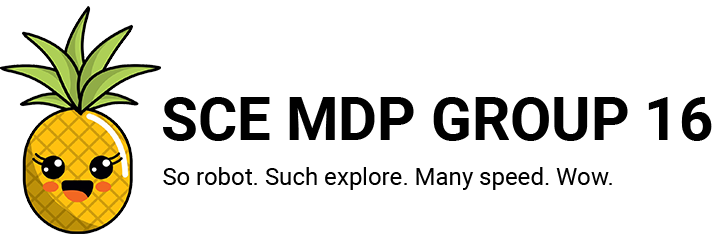
<style>
.page{position:relative;width:720px;height:240px;background:#ffffff}
.page>*{position:absolute;margin:0}
.t1{font:60px "Roboto-Bold";color:#000000}
.t2{font:24px "Roboto-Regular";color:#000000}
</style>
<div class="page">
<p class="t1" style="left:163px;top:97px;width:549px;height:44px">SCE MDP GROUP 16</p>
<p class="t2" style="left:163px;top:167px;width:449px;height:23px">So robot. Such explore. Many speed. Wow.</p>
</div>
